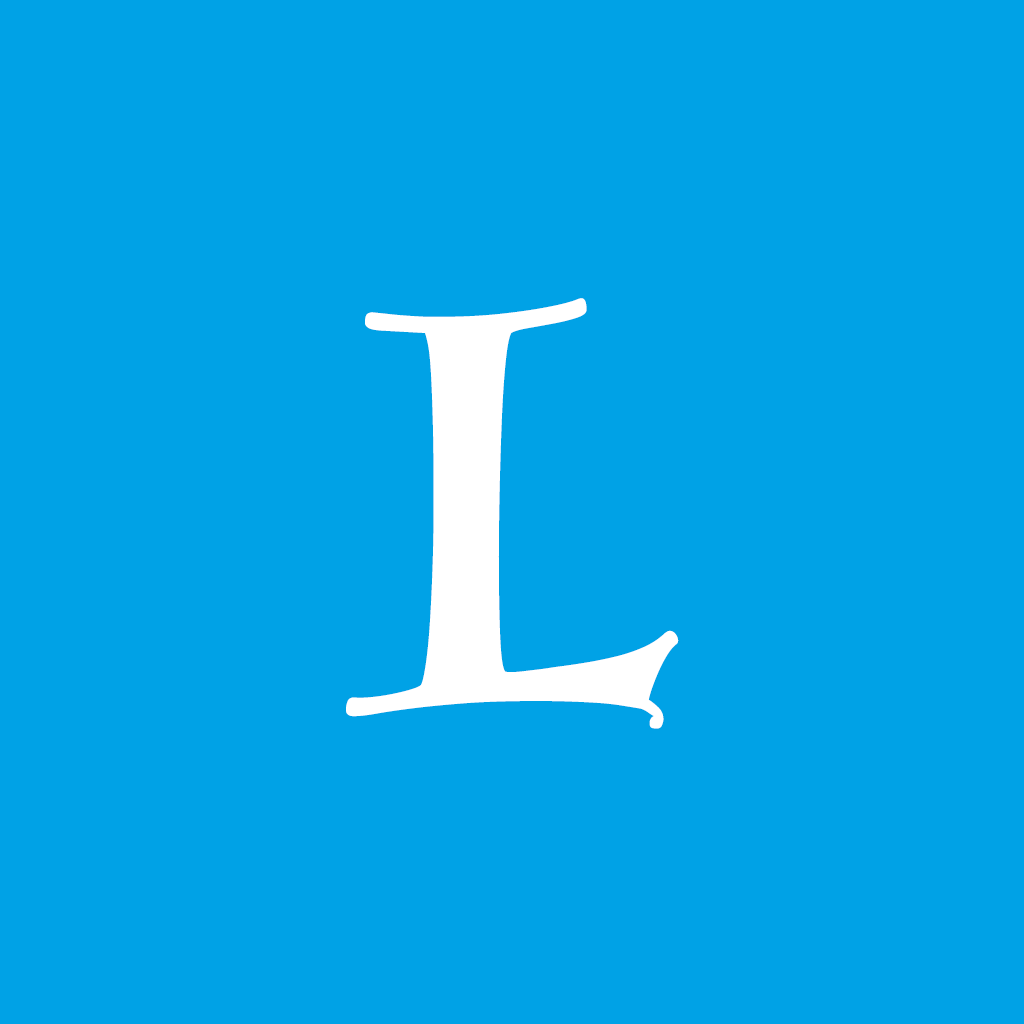
<style>
.page{position:relative;width:1024px;height:1024px;background:#00a2e6}
.page>*{position:absolute;margin:0}
.t1{font:541.3px "Luminari-Regular";letter-spacing:0.1em;color:#ffffff}
</style>
<div class="page">
<p class="t1" style="left:346px;top:298px;width:333px;height:431px">L</p>
</div>
